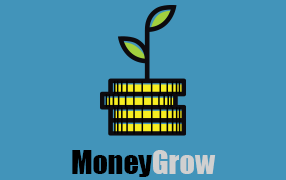
<style>
.page{position:relative;width:286px;height:180px;background:#4294ba}
.page>*{position:absolute;margin:0}
.t1{font:30px "Impact";color:#000000}
.t2{font:30px "Impact";color:#d0d0d0}
</style>
<div class="page">
<p class="t1" style="left:72px;top:150px;width:144px;height:27px">Money<span class="t2">Grow</span></p>
</div>
